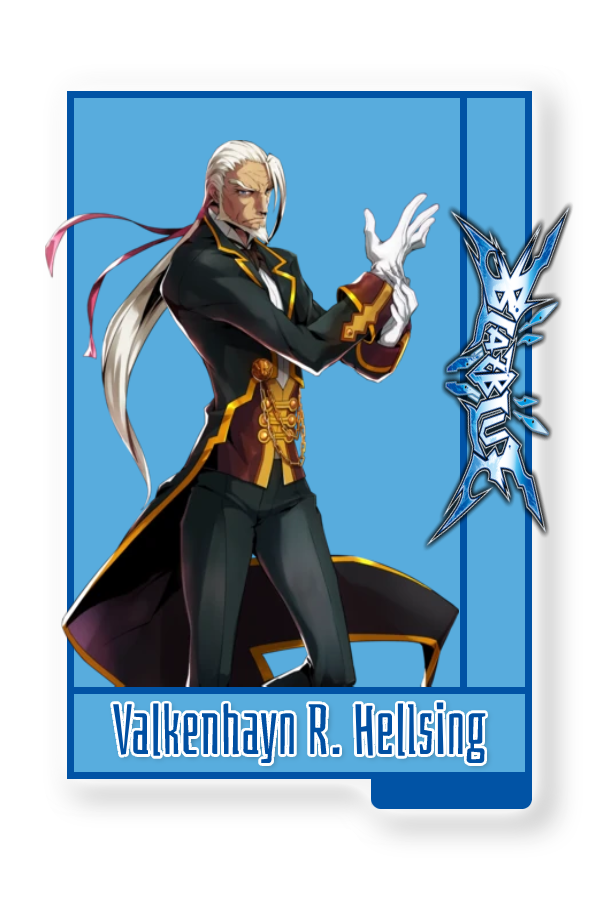
<style>
.page{position:relative;width:600px;height:900px;background:#ffffff}
.page>*{position:absolute;margin:0}
.t1{font:70px "Bahianita-Regular";color:#004fa2}
</style>
<div class="page">
<p class="t1" style="left:113px;top:702px;width:373px;height:62px">Valkenhayn R. Hellsing</p>
</div>
